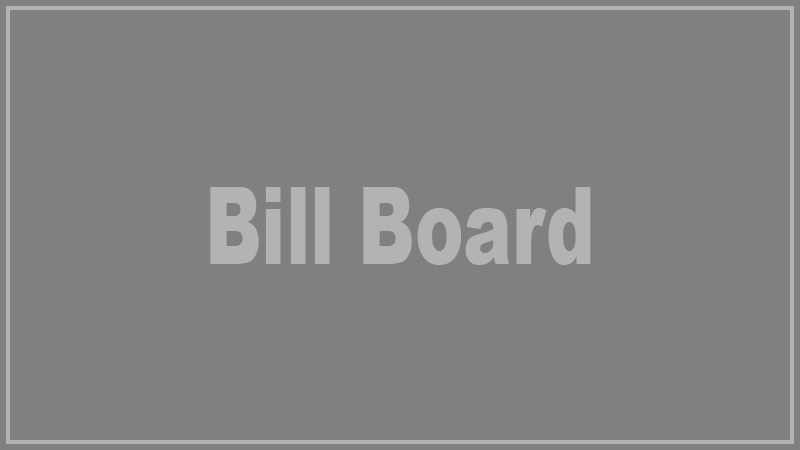
<style>
.page{position:relative;width:800px;height:450px;background:#808080}
.page>*{position:absolute;margin:0}
.t1{font:106.7px "Arial-Black";color:#b3b3b3;scale:0.68 1}
</style>
<div class="page">
<p class="t1" style="left:210px;top:187px;width:381px;height:78px">Bill Board</p>
</div>
